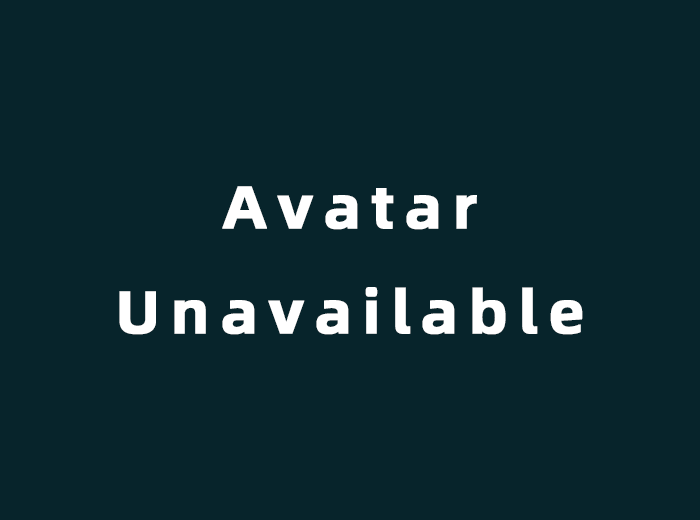
<style>
.page{position:relative;width:700px;height:520px;background:#07242b}
.page>*{position:absolute;margin:0}
.t1{font:60px "Alibaba-PuHuiTi-B";letter-spacing:0.16em;color:#ffffff;font-weight:bold}
</style>
<div class="page">
<p class="t1" style="left:119px;top:186px;width:464px;height:149px;text-align:center">Avatar<br>Unavailable</p>
</div>
